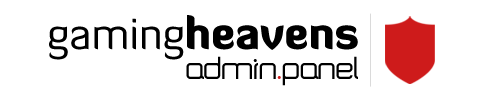
<style>
.page{position:relative;width:500px;height:100px;background:#ffffff}
.page>*{position:absolute;margin:0}
.t1{font:44px "DiavloBlack-Regular";color:#000000}
.t2{font:44px "DiavloBook-Regular";color:#000000}
.t3{font:32px "SquareTypeB";color:#000000}
.t4{font:32px "SquareTypeB";color:#ce1b1b}
</style>
<div class="page">
<p class="t1" style="left:49px;top:15px;width:309px;height:45px"><span class="t2">gaming</span>heavens</p>
<p class="t3" style="left:186px;top:56px;width:172px;height:30px">admin<span class="t4">.</span>panel</p>
</div>
